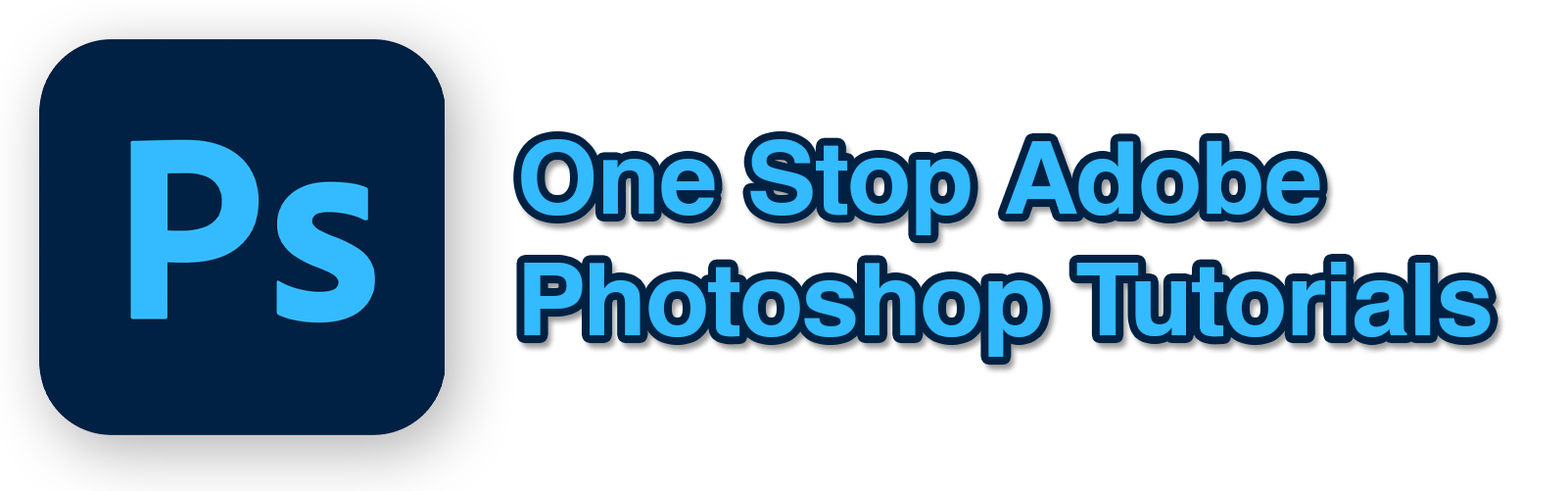
<style>
.page{position:relative;width:1568px;height:491px;background:#ffffff}
.page>*{position:absolute;margin:0}
.t1{font:101.3px "Helvetica-Bold";color:#33baff}
</style>
<div class="page">
<p class="t1" style="left:521px;top:139px;width:970px;height:218px">One Stop Adobe<br>Photoshop Tutorials</p>
</div>
